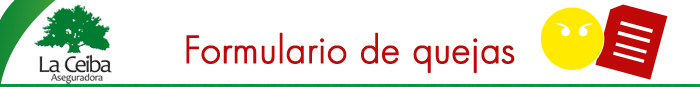
<style>
.page{position:relative;width:700px;height:87px;background:#ffffff}
.page>*{position:absolute;margin:0}
.t1{font:36px "Futura-Light";color:#bf0909;font-weight:bold}
</style>
<div class="page">
<p class="t1" style="left:186px;top:32px;width:329px;height:41px">Formulario de quejas</p>
</div>
